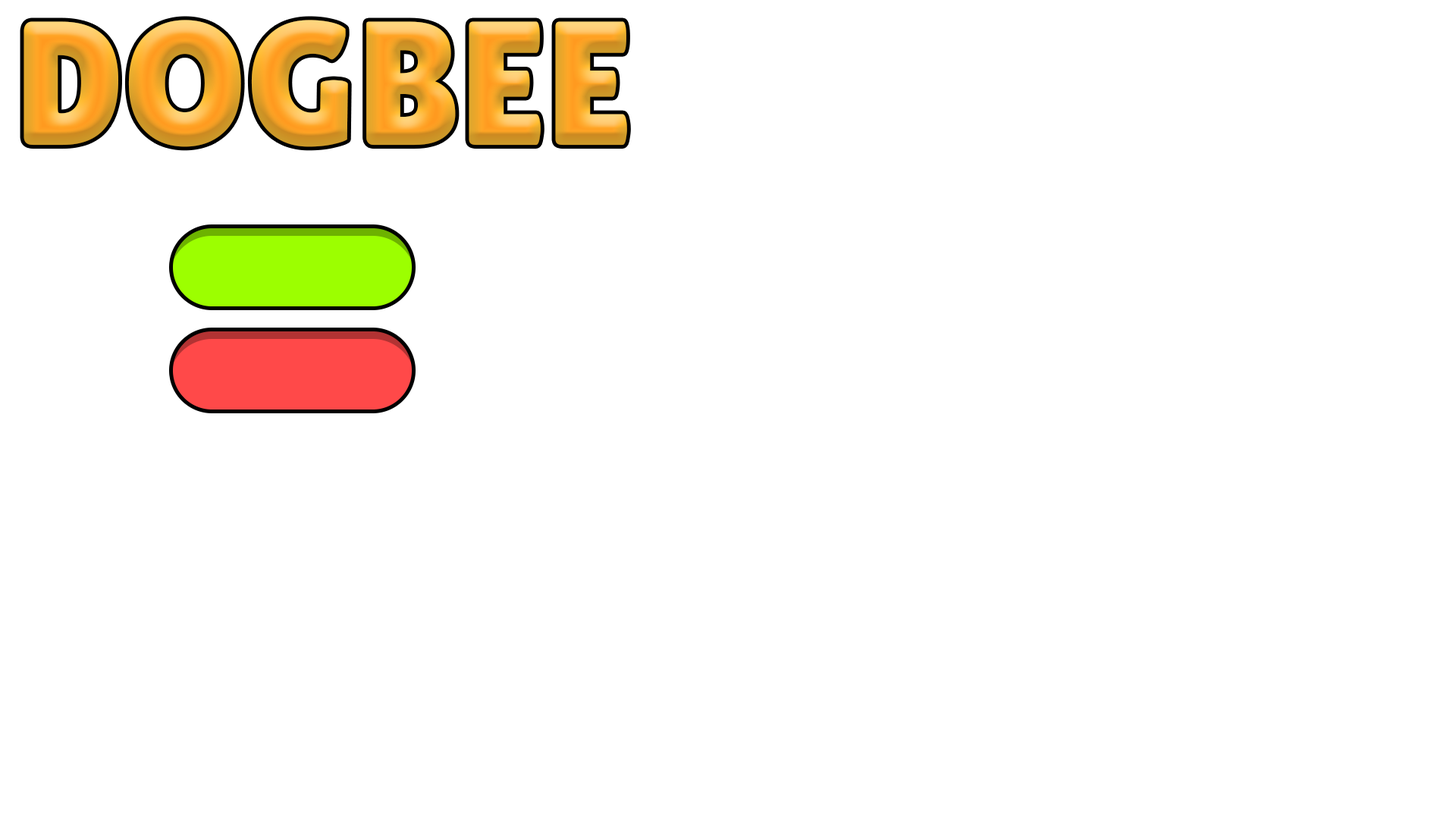
<style>
.page{position:relative;width:1456px;height:819px;background:#ffffff}
.page>*{position:absolute;margin:0}
.t1{font:175.9px "LilitaOne"}
</style>
<div class="page">
<p class="t1" style="left:24px;top:20px;width:603px;height:127px">DOGBEE</p>
</div>
